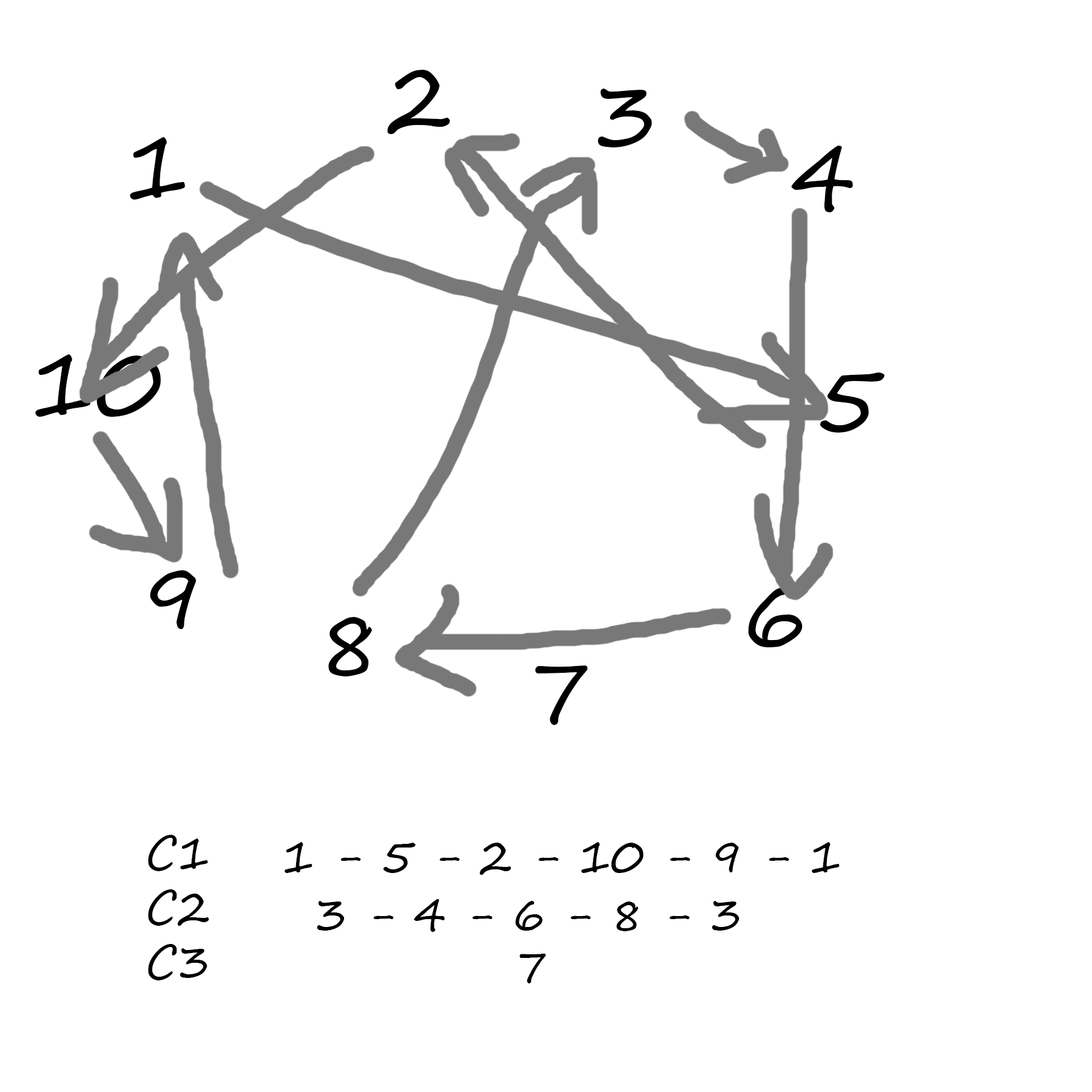
<style>
.page{position:relative;width:1092px;height:1092px;background:#ffffff}
.page>*{position:absolute;margin:0}
.t1{font:91px "SegoePrint";color:#000000}
.t2{font:45.5px "SegoePrint";color:#000000}
</style>
<div class="page">
<p class="t1" style="left:387px;top:70px;width:63px;height:64px">2</p>
<p class="t1" style="left:598px;top:89px;width:54px;height:58px">3</p>
<p class="t1" style="left:130px;top:137px;width:55px;height:63px">1</p>
<p class="t1" style="left:791px;top:146px;width:62px;height:66px">4</p>
<p class="t1" style="left:35px;top:354px;width:126px;height:63px">10</p>
<p class="t1" style="left:820px;top:372px;width:65px;height:61px">5</p>
<p class="t1" style="left:150px;top:570px;width:47px;height:59px">9</p>
<p class="t1" style="left:748px;top:588px;width:55px;height:59px">6</p>
<p class="t1" style="left:328px;top:617px;width:44px;height:59px">8</p>
<p class="t1" style="left:535px;top:666px;width:53px;height:59px">7</p>
<p class="t2" style="left:148px;top:835px;width:61px;height:145px;text-align:center">C1<br>C2<br>C3</p>
<p class="t2" style="left:285px;top:842px;width:555px;height:33px">1 - 5 - 2 - 10 - 9 - 1</p>
<p class="t2" style="left:317px;top:899px;width:423px;height:33px">3 - 4 - 6 - 8 - 3</p>
<p class="t2" style="left:519px;top:954px;width:27px;height:29px">7</p>
</div>
